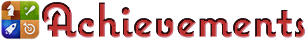
<style>
.page{position:relative;width:305px;height:40px;background:#ffffff}
.page>*{position:absolute;margin:0}
.t1{font:48px "CoquetteBold"}
</style>
<div class="page">
<p class="t1" style="left:42px;top:2px;width:263px;height:36px">Achievements</p>
<p class="t1" style="left:42px;top:2px;width:263px;height:36px">Achievements</p>
</div>
